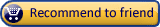
<style>
.page{position:relative;width:160px;height:27px}
.page>*{position:absolute;margin:0}
.t1{font:14px "Calibri";color:#000065}
</style>
<div class="page">
<p class="t1" style="left:30px;top:7px;width:123px;height:11px">Recommend to friend</p>
</div>
